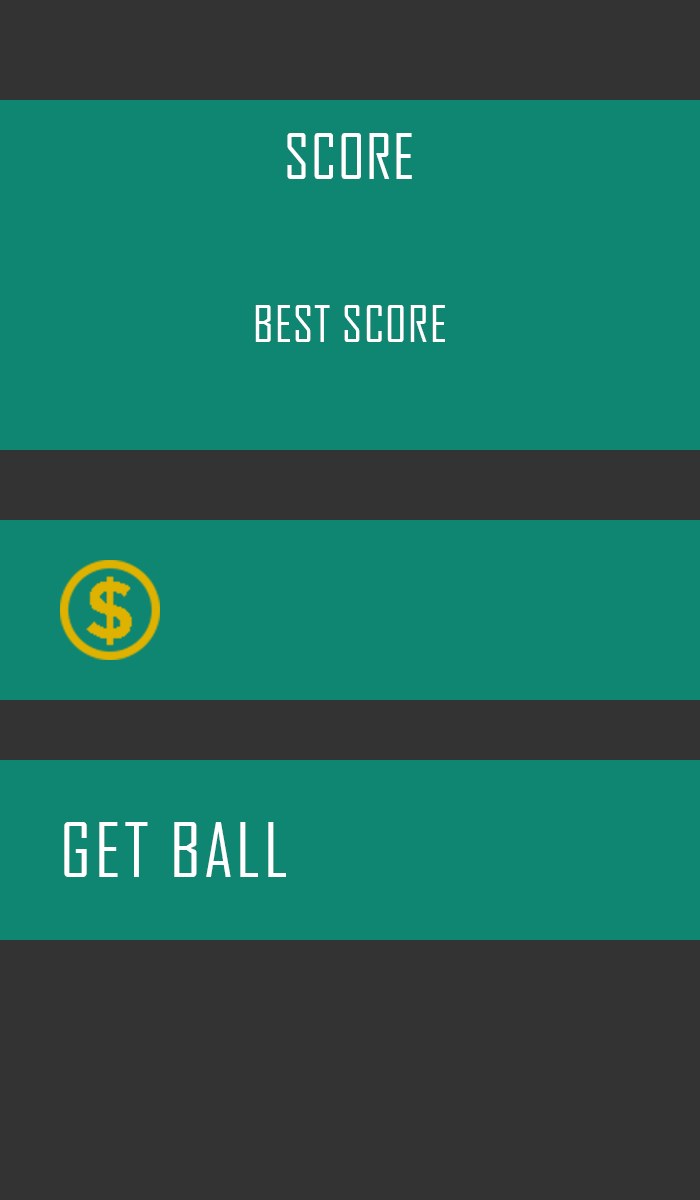
<style>
.page{position:relative;width:700px;height:1200px;background:#0f8671}
.page>*{position:absolute;margin:0}
.t1{font:60px "AgencyFB-Reg";letter-spacing:0.025em;color:#ffffff}
.t2{font:48px "AgencyFB-Reg";letter-spacing:0.025em;color:#ffffff}
.t3{font:72px "AgencyFB-Reg";letter-spacing:0.05em;color:#ffffff}
</style>
<div class="page">
<p class="t1" style="left:287px;top:133px;width:125px;height:46px">SCORE</p>
<p class="t2" style="left:255px;top:305px;width:190px;height:37px">BEST SCORE</p>
<p class="t3" style="left:64px;top:822px;width:222px;height:55px">GET BALL</p>
</div>
